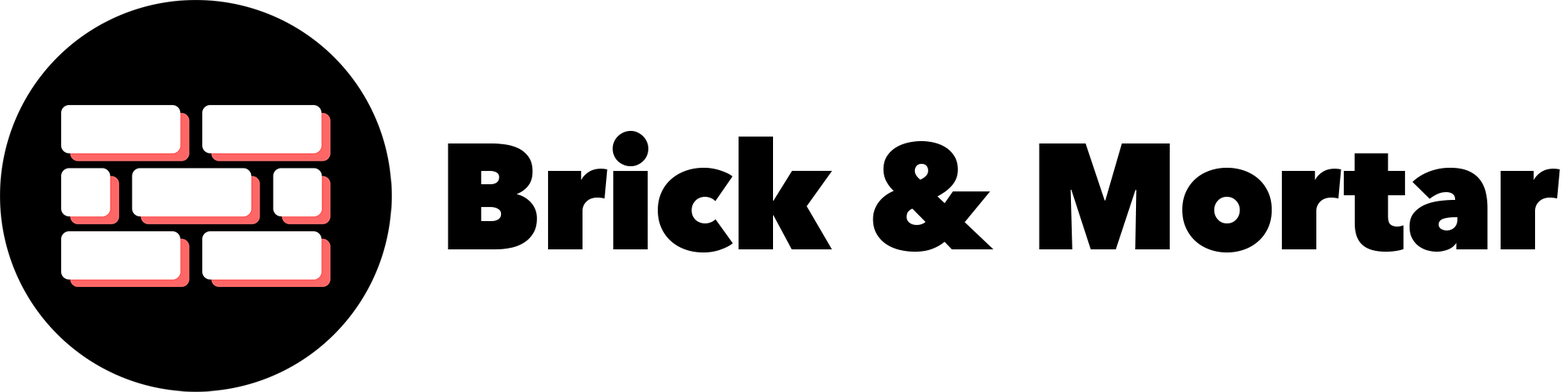
<style>
.page{position:relative;width:1568px;height:392px;background:#ffffff}
.page>*{position:absolute;margin:0}
.t1{font:148.6px "AvenirNext-Heavy";color:#000000}
</style>
<div class="page">
<p class="t1" style="left:448px;top:131px;width:1112px;height:121px">Brick &amp; Mortar</p>
</div>
